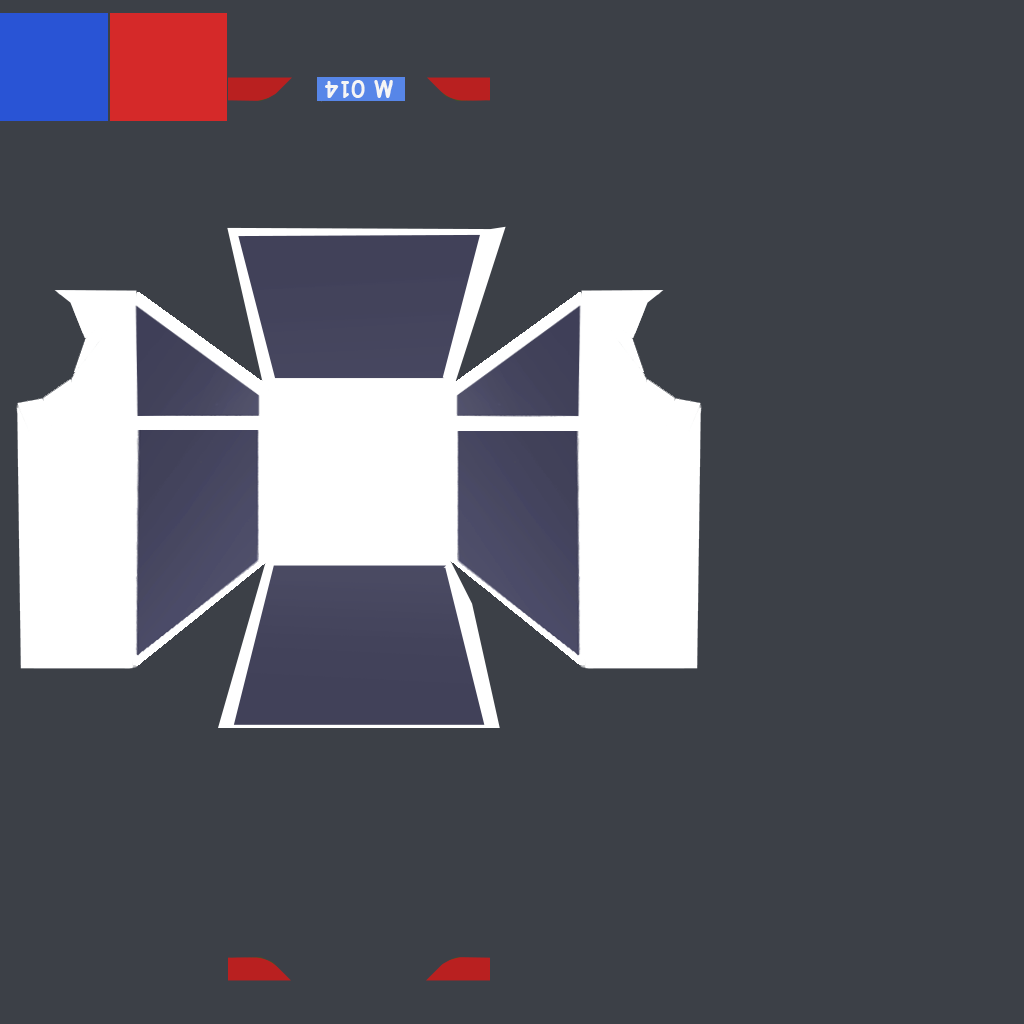
<style>
.page{position:relative;width:1024px;height:1024px;background:#3c4047}
.page>*{position:absolute;margin:0}
.t1{font:21.7px "ComicSansMS-Bold";color:#f5f5f5}
</style>
<div class="page">
<p class="t1" style="left:325px;top:80px;width:68px;height:18px;rotate:180deg">М 014</p>
</div>
